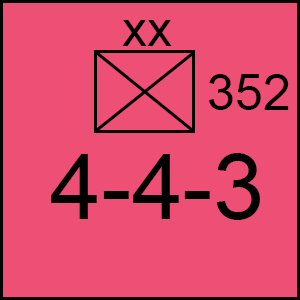
<style>
.page{position:relative;width:300px;height:300px;background:#ee4f74}
.page>*{position:absolute;margin:0}
.t1{font:50px "ArialMT";color:#000000}
.t2{font:91.7px "ArialMT";color:#000000}
</style>
<div class="page">
<p class="t1" style="left:122px;top:20px;width:50px;height:26px">xx</p>
<p class="t1" style="left:209px;top:74px;width:80px;height:36px">352</p>
<p class="t2" style="left:51px;top:153px;width:209px;height:67px">4-4-3</p>
</div>
